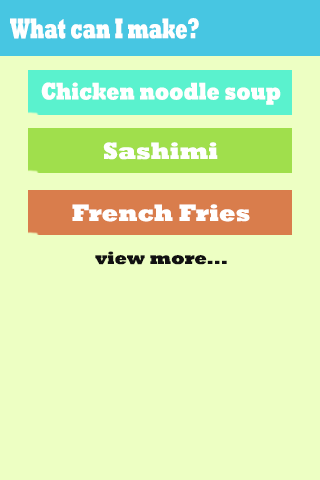
<style>
.page{position:relative;width:320px;height:480px;background:#edffc3}
.page>*{position:absolute;margin:0}
.t1{font:28.8px "Rockwell-ExtraBold";color:#ffffff;scale:0.62 1}
.t2{font:24.3px "Rockwell-ExtraBold";color:#ffffff;scale:0.78 1}
.t3{font:24px "Rockwell-ExtraBold";color:#ffffff}
.t4{font:18px "Rockwell-ExtraBold";color:#111111}
</style>
<div class="page">
<p class="t1" style="left:10px;top:18px;width:189px;height:21px">What can I make?</p>
<p class="t2" style="left:41px;top:82px;width:240px;height:23px">Chicken noodle soup</p>
<p class="t3" style="left:103px;top:142px;width:115px;height:18px">Sashimi</p>
<p class="t3" style="left:72px;top:204px;width:178px;height:18px">French Fries</p>
<p class="t4" style="left:95px;top:251px;width:132px;height:14px">view more...</p>
</div>
